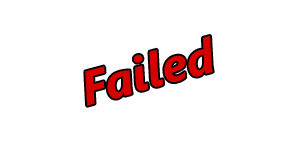
<style>
.page{position:relative;width:300px;height:160px;background:#ffffff}
.page>*{position:absolute;margin:0}
.t1{font:48px "SegoeUI-BoldItalic";color:#d60000}
</style>
<div class="page">
<p class="t1" style="left:85px;top:36px;width:128px;height:70px;rotate:-15deg">Failed</p>
</div>
